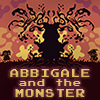
<style>
.page{position:relative;width:100px;height:100px}
.page>*{position:absolute;margin:0}
.t1{font:9px "PressStart2P";letter-spacing:0.125em;color:#ddbc59}
.t2{font:8px "PressStart2P";letter-spacing:0.125em;color:#ddbc59}
</style>
<div class="page">
<p class="t1" style="left:10px;top:69px;width:80px;height:28px;text-align:center">ABBIGALE<br><span class="t2">and the<br></span>MONSTER</p>
</div>
